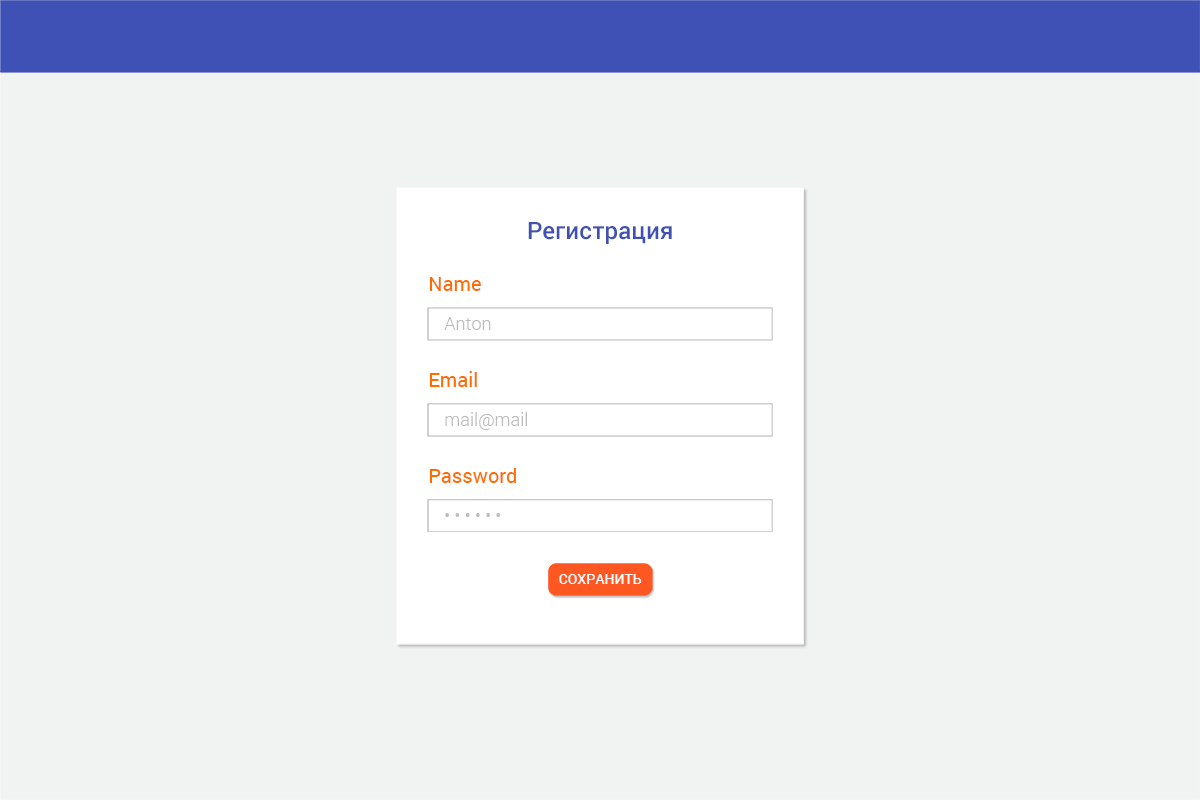
<style>
.page{position:relative;width:1200px;height:800px;background:#f1f2f2}
.page>*{position:absolute;margin:0}
.t1{font:24px "Roboto-Medium";color:#3f51b5}
.t2{font:20px "Roboto-Regular";color:#ff6c00}
.t3{font:18px "Roboto-Light";color:#bdbdbd}
.t4{font:14px "Roboto-Medium";letter-spacing:0.005em;color:#ffffff;text-transform:uppercase}
</style>
<div class="page">
<p class="t1" style="left:528px;top:222px;width:144px;height:22px">Регистрация</p>
<p class="t2" style="left:429px;top:277px;width:52px;height:14px">Name</p>
<p class="t3" style="left:444px;top:317px;width:47px;height:13px">Anton</p>
<p class="t2" style="left:429px;top:371px;width:48px;height:16px">Email</p>
<p class="t3" style="left:445px;top:412px;width:82px;height:18px">mail@mail</p>
<p class="t2" style="left:429px;top:468px;width:87px;height:15px">Password</p>
<p class="t3" style="left:445px;top:513px;width:55px;height:4px">• • • • • •</p>
<p class="t4" style="left:559px;top:574px;width:83px;height:10px">сохранить</p>
</div>
